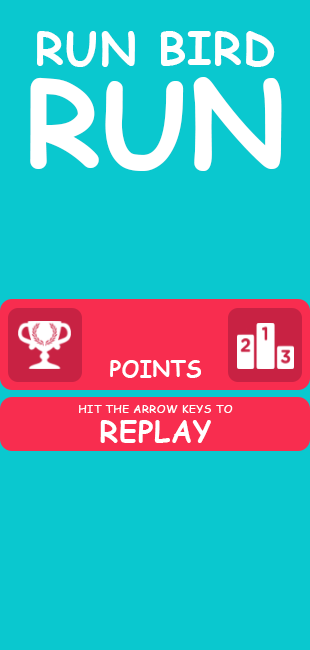
<style>
.page{position:relative;width:310px;height:650px;background:#0ac8cf}
.page>*{position:absolute;margin:0}
.t1{font:45px "ComicSansMS-Bold";letter-spacing:0.025em;color:#ffffff}
.t2{font:119.1px "ComicSansMS-Bold";letter-spacing:0.001em;color:#ffffff}
.t3{font:21.8px "ComicSansMS-Bold";letter-spacing:0.025em;color:#ffffff}
.t4{font:11.3px "ComicSansMS";letter-spacing:0.025em;color:#ffffff}
.t5{font:29.2px "ComicSansMS-Bold";letter-spacing:0.025em;color:#ffffff}
</style>
<div class="page">
<p class="t1" style="left:37px;top:31px;width:238px;height:36px">RUN BIRD</p>
<p class="t2" style="left:30px;top:77px;width:252px;height:94px">RUN</p>
<p class="t3" style="left:110px;top:360px;width:91px;height:18px">POINTS</p>
<p class="t4" style="left:79px;top:405px;width:154px;height:8px">HIT THE ARROW KEYS TO</p>
<p class="t5" style="left:100px;top:420px;width:111px;height:23px">REPLAY</p>
</div>
